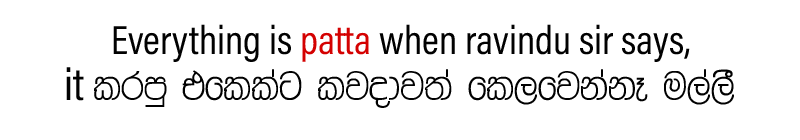
<style>
.page{position:relative;width:800px;height:140px;background:#ffffff}
.page>*{position:absolute;margin:0}
.t1{font:46px/46px "4u-Sawana";color:#010101}
.t2{font:41px/46px "AcuminConcept-Condensed";color:#010101}
.t3{font:41px/46px "AcuminConcept-Condensed";color:#d40101}
.t4{font:46px/46px "AcuminConcept-Condensed";color:#010101}
</style>
<div class="page">
<p class="t1" style="left:66px;top:24px;width:668px;height:84px;text-align:center"><span class="t2">Everything is </span><span class="t3">patta</span><span class="t2"> when ravindu sir says,<br></span><span class="t4">it </span>lrmq tfllag ljodj;a fl,fjkakE u,a,S</p>
</div>
